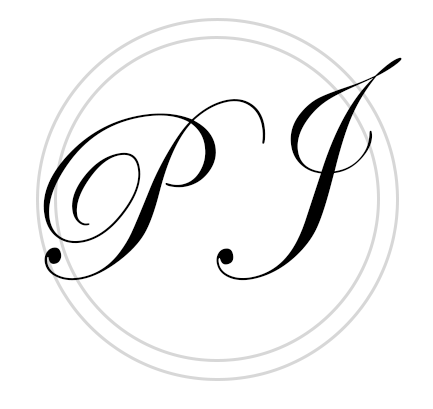
<style>
.page{position:relative;width:433px;height:409px;background:#ffffff}
.page>*{position:absolute;margin:0}
.t1{font:220px "EdwardianScriptITC";color:#000000}
</style>
<div class="page">
<p class="t1" style="left:43px;top:57px;width:359px;height:224px;rotate:-11deg">P J</p>
</div>
